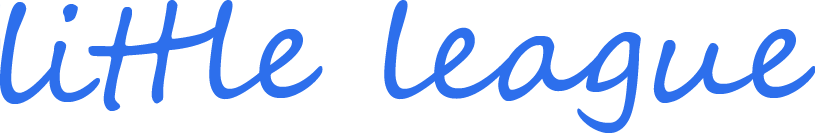
<style>
.page{position:relative;width:815px;height:133px;background:#ffffff}
.page>*{position:absolute;margin:0}
.t1{font:133.3px "SegoeScript";color:#2d6fec}
</style>
<div class="page">
<p class="t1" style="left:0px;top:0px;width:815px;height:133px">little league</p>
</div>
